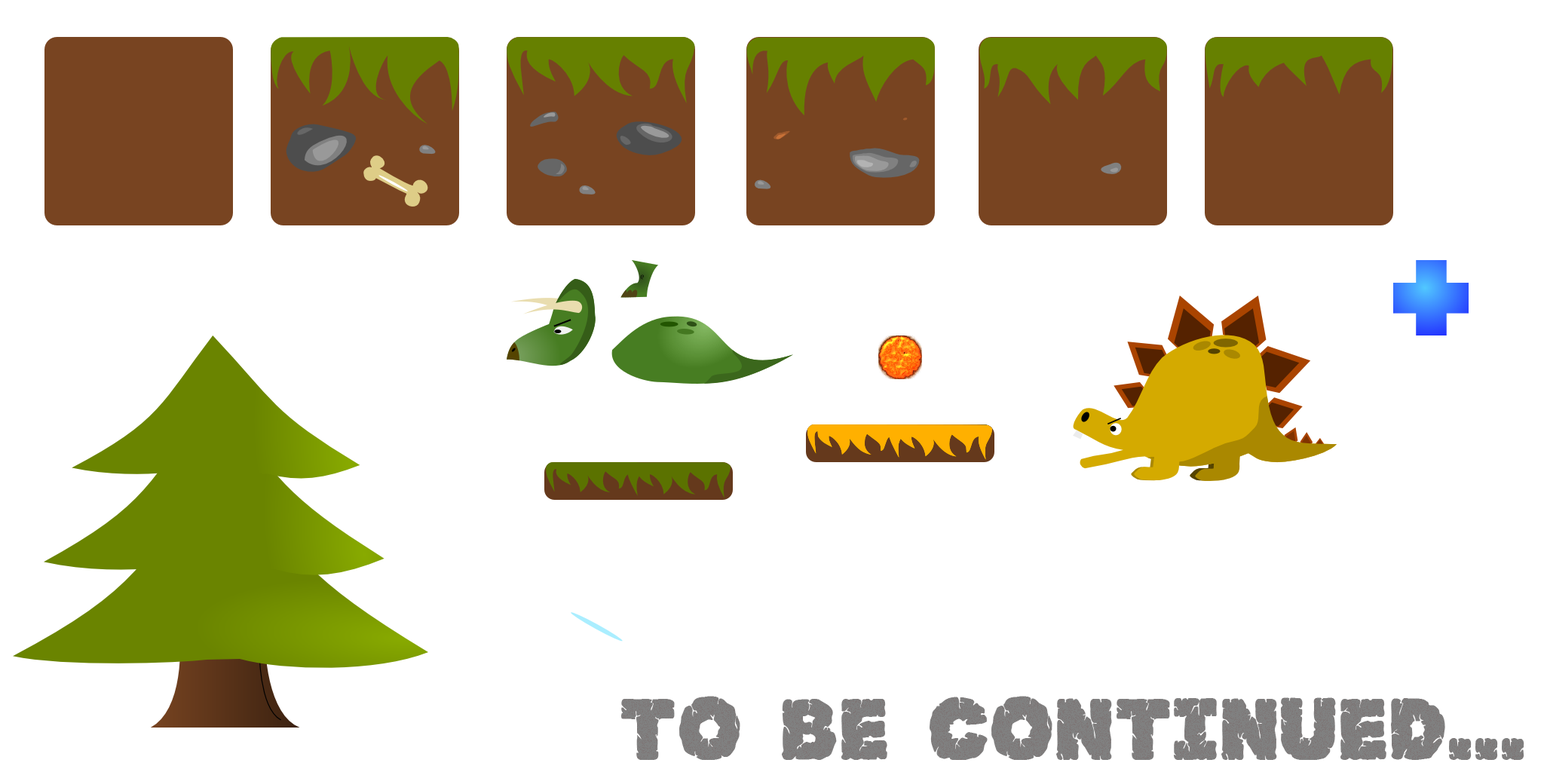
<style>
.page{position:relative;width:1544px;height:772px;background:#ffffff}
.page>*{position:absolute;margin:0}
.t1{font:75.4px "JFRockSolid";color:#808080}
</style>
<div class="page">
<p class="t1" style="left:621px;top:696px;width:904px;height:64px">to be continued...</p>
</div>
